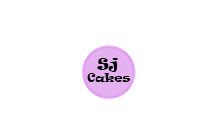
<style>
.page{position:relative;width:200px;height:134px;background:#ffffff}
.page>*{position:absolute;margin:0}
.t1{font:11.2px "Ravie";color:#000000}
.t2{font:8.4px "Ravie";color:#000000}
.t3{font:14px "Ravie";color:#000000}
</style>
<div class="page">
<p class="t1" style="left:87px;top:58px;width:44px;height:24px"><span class="t2">   </span><span class="t3">Sj<br></span>Cakes</p>
</div>
